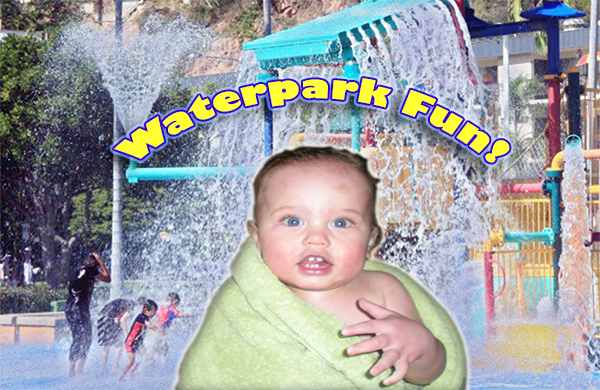
<style>
.page{position:relative;width:600px;height:390px}
.page>*{position:absolute;margin:0}
.t1{font:31.7px "GillSans-UltraBold";color:#ffff33;scale:1.11 1}
</style>
<div class="page">
<p class="t1" style="left:114px;top:78px;width:396px;height:85px">Waterpark Fun!</p>
</div>
